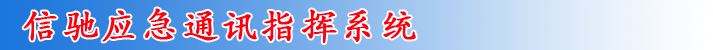
<style>
.page{position:relative;width:713px;height:50px}
.page>*{position:absolute;margin:0}
.t1{font:36px "STKaiti";letter-spacing:0.075em;color:#fe000c;font-weight:bold}
</style>
<div class="page">
<p class="t1" style="left:23px;top:8px;width:393px;height:35px">信驰应急通讯指挥系统</p>
</div>
